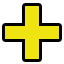
<style>
.page{position:relative;width:64px;height:64px;background:#ffffff}
.page>*{position:absolute;margin:0}
.t1{font:108.3px "FranklinGothic-Heavy";letter-spacing:-0.03em;color:#f0e312}
</style>
<div class="page">
<p class="t1" style="left:5px;top:6px;width:54px;height:53px">+</p>
</div>
